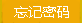
<style>
.page{position:relative;width:82px;height:23px;background:#f0aa05}
.page>*{position:absolute;margin:0}
.t1{font:14px "MicrosoftYaHei";color:#ffffff}
</style>
<div class="page">
<p class="t1" style="left:14px;top:6px;width:55px;height:12px">忘记密码</p>
</div>
